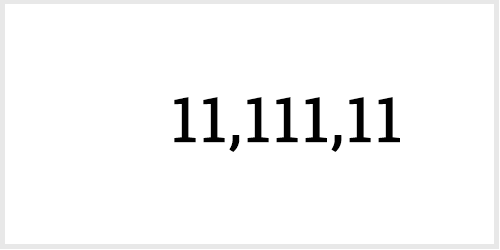
<style>
.page{position:relative;width:500px;height:250px;background:#ffffff}
.page>*{position:absolute;margin:0}
.t1{font:63px "RobotoSlab-Regular";color:#000000;font-weight:bold;scale:1.05 1}
</style>
<div class="page">
<p class="t1" style="left:174px;top:97px;width:226px;height:55px">11,111,11</p>
</div>
